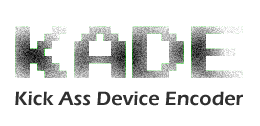
<style>
.page{position:relative;width:260px;height:126px;background:#ffffff}
.page>*{position:absolute;margin:0}
.t1{font:20px "ErasITC-Demi";color:#303030}
</style>
<div class="page">
<p class="t1" style="left:15px;top:91px;width:228px;height:15px">Kick Ass Device Encoder</p>
</div>
